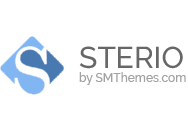
<style>
.page{position:relative;width:188px;height:132px;background:#ffffff}
.page>*{position:absolute;margin:0}
.t1{font:12px "Raleway-Medium";color:#a2a2a2}
.t2{font:30px "Raleway-Medium";color:#676767}
</style>
<div class="page">
<p class="t1" style="left:79px;top:46px;width:107px;height:39px"><span class="t2">STERIO<br></span>by SMThemes.com</p>
</div>
